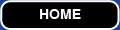
<style>
.page{position:relative;width:120px;height:30px;background:#000000}
.page>*{position:absolute;margin:0}
.t1{font:14px "Helvetica-Bold";color:#ffffff}
</style>
<div class="page">
<p class="t1" style="left:40px;top:9px;width:41px;height:10px">HOME</p>
</div>
